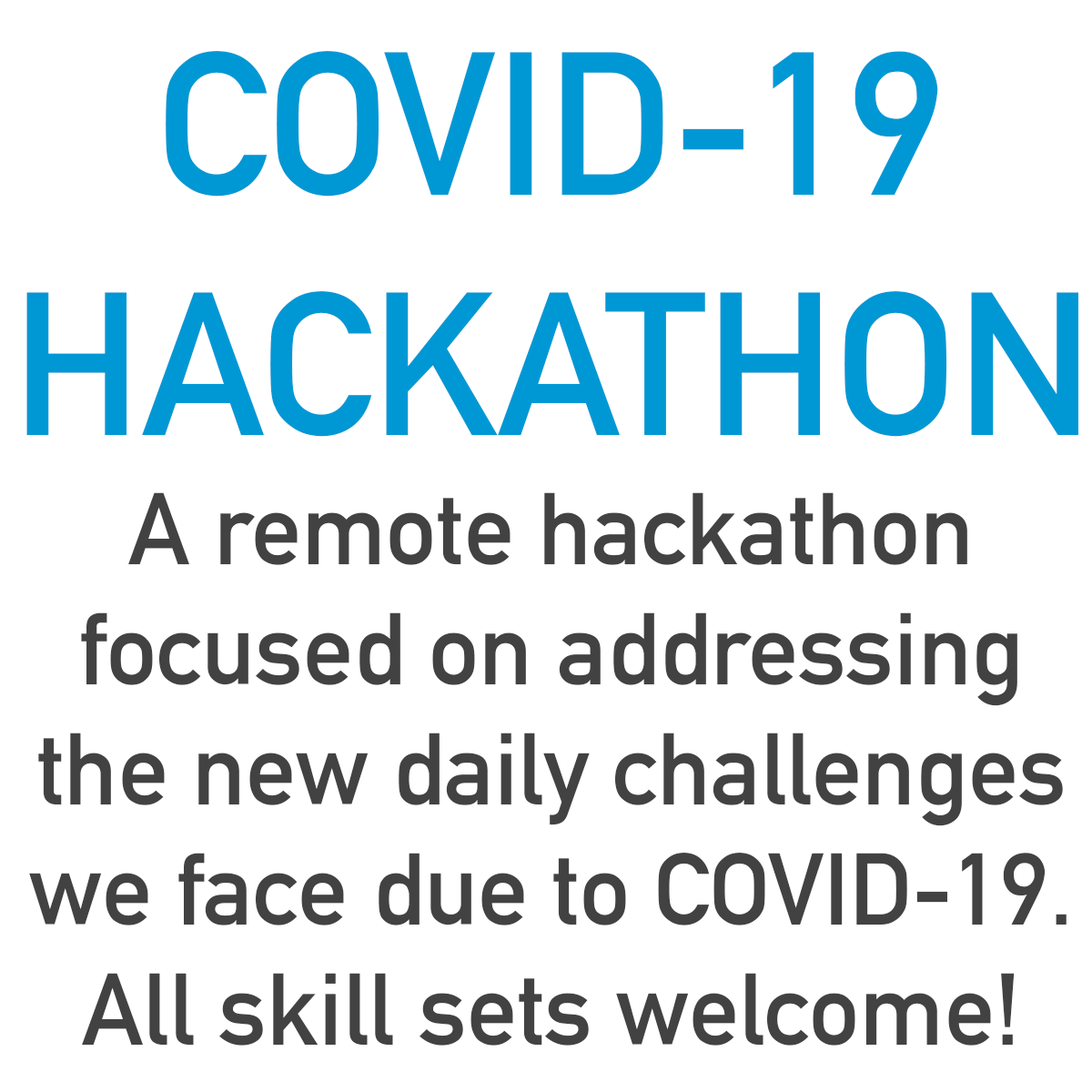
<style>
.page{position:relative;width:1092px;height:1092px;background:#ffffff}
.page>*{position:absolute;margin:0}
.t1{font:200.2px "DINAlternate-Bold";color:#0098d4}
.t2{font:100.1px "DINAlternate-Bold";color:#424242}
</style>
<div class="page">
<p class="t1" style="left:26px;top:51px;width:1052px;height:386px;text-align:center">COVID-19<br>HACKATHON</p>
<p class="t2" style="left:29px;top:492px;width:1038px;height:554px;text-align:center">A remote hackathon focused on addressing the new daily challenges we face due to COVID-19. All skill sets welcome!</p>
</div>
